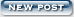
<style>
.page{position:relative;width:74px;height:17px}
.page>*{position:absolute;margin:0}
.t1{font:12px "CopperplateGothicBT-Bold";color:#ffffff}
</style>
<div class="page">
<p class="t1" style="left:9px;top:4px;width:55px;height:7px">new post</p>
</div>
